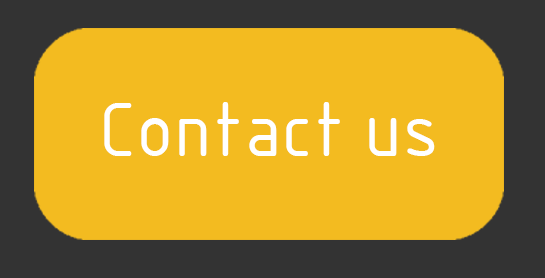
<style>
.page{position:relative;width:545px;height:278px;background:#f3bb20}
.page>*{position:absolute;margin:0}
.t1{font:75px "GOST-Common";color:#ffffff}
.t2{font:125px "GOST-Common";color:#ffffff}
</style>
<div class="page">
<p class="t1" style="left:104px;top:102px;width:331px;height:54px">Contact us<span class="t2"> us</span></p>
</div>
